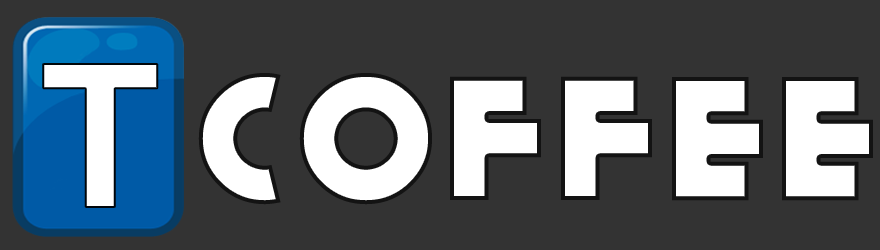
<style>
.page{position:relative;width:880px;height:250px;background:#333333}
.page>*{position:absolute;margin:0}
.t1{font:200px "Arial-BoldMT";color:#ffffff}
.t2{font:180px "KiloGram";letter-spacing:0.08em;color:#ffffff}
</style>
<div class="page">
<p class="t1" style="left:43px;top:64px;width:115px;height:143px">T</p>
<p class="t2" style="left:198px;top:73px;width:675px;height:132px">cOffee</p>
</div>
